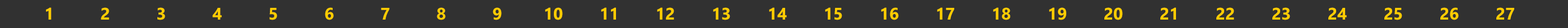
<style>
.page{position:relative;width:1568px;height:28px;background:#313131}
.page>*{position:absolute;margin:0}
.t1{font:16.8px "SegoeUI-Bold";color:#ffcc00}
</style>
<div class="page">
<p class="t1" style="left:46px;top:7px;width:6px;height:13px">1</p>
<p class="t1" style="left:101px;top:7px;width:8px;height:13px">2</p>
<p class="t1" style="left:157px;top:7px;width:8px;height:13px">3</p>
<p class="t1" style="left:212px;top:8px;width:10px;height:12px">4</p>
<p class="t1" style="left:269px;top:8px;width:8px;height:12px">5</p>
<p class="t1" style="left:325px;top:7px;width:9px;height:13px">6</p>
<p class="t1" style="left:381px;top:8px;width:9px;height:12px">7</p>
<p class="t1" style="left:437px;top:7px;width:9px;height:13px">8</p>
<p class="t1" style="left:493px;top:7px;width:9px;height:13px">9</p>
<p class="t1" style="left:545px;top:7px;width:18px;height:13px">10</p>
<p class="t1" style="left:601px;top:7px;width:15px;height:13px">11</p>
<p class="t1" style="left:657px;top:7px;width:17px;height:13px">12</p>
<p class="t1" style="left:713px;top:7px;width:17px;height:13px">13</p>
<p class="t1" style="left:769px;top:7px;width:18px;height:13px">14</p>
<p class="t1" style="left:825px;top:7px;width:17px;height:13px">15</p>
<p class="t1" style="left:881px;top:7px;width:18px;height:13px">16</p>
<p class="t1" style="left:937px;top:7px;width:17px;height:13px">17</p>
<p class="t1" style="left:993px;top:7px;width:17px;height:13px">18</p>
<p class="t1" style="left:1049px;top:7px;width:17px;height:13px">19</p>
<p class="t1" style="left:1104px;top:7px;width:19px;height:13px">20</p>
<p class="t1" style="left:1160px;top:7px;width:16px;height:13px">21</p>
<p class="t1" style="left:1216px;top:7px;width:18px;height:13px">22</p>
<p class="t1" style="left:1272px;top:7px;width:18px;height:13px">23</p>
<p class="t1" style="left:1328px;top:7px;width:19px;height:13px">24</p>
<p class="t1" style="left:1384px;top:7px;width:18px;height:13px">25</p>
<p class="t1" style="left:1440px;top:7px;width:19px;height:13px">26</p>
<p class="t1" style="left:1496px;top:7px;width:18px;height:13px">27</p>
</div>
